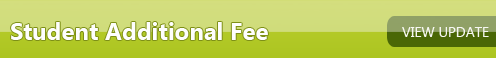
<style>
.page{position:relative;width:496px;height:58px}
.page>*{position:absolute;margin:0}
.t1{font:24px "SegoeUI-Bold";color:#fefefe}
.t2{font:14px "SegoeUI";color:#f6f7f1}
</style>
<div class="page">
<p class="t1" style="left:11px;top:22px;width:257px;height:18px">Student Additional Fee</p>
<p class="t2" style="left:402px;top:27px;width:87px;height:10px">VIEW UPDATE</p>
</div>
